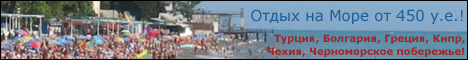
<style>
.page{position:relative;width:468px;height:60px}
.page>*{position:absolute;margin:0}
.t1{font:15px "Verdana";color:#1c619d}
.t2{font:10px "Verdana-Bold";color:#a72323}
</style>
<div class="page">
<p class="t1" style="left:251px;top:9px;width:212px;height:15px">Отдых на Море от 450 у.е.!</p>
<p class="t2" style="left:274px;top:34px;width:191px;height:10px">Турция, Болгария, Греция, Кипр,</p>
<p class="t2" style="left:267px;top:47px;width:197px;height:10px">Чехия, Черноморское побережье!</p>
</div>
